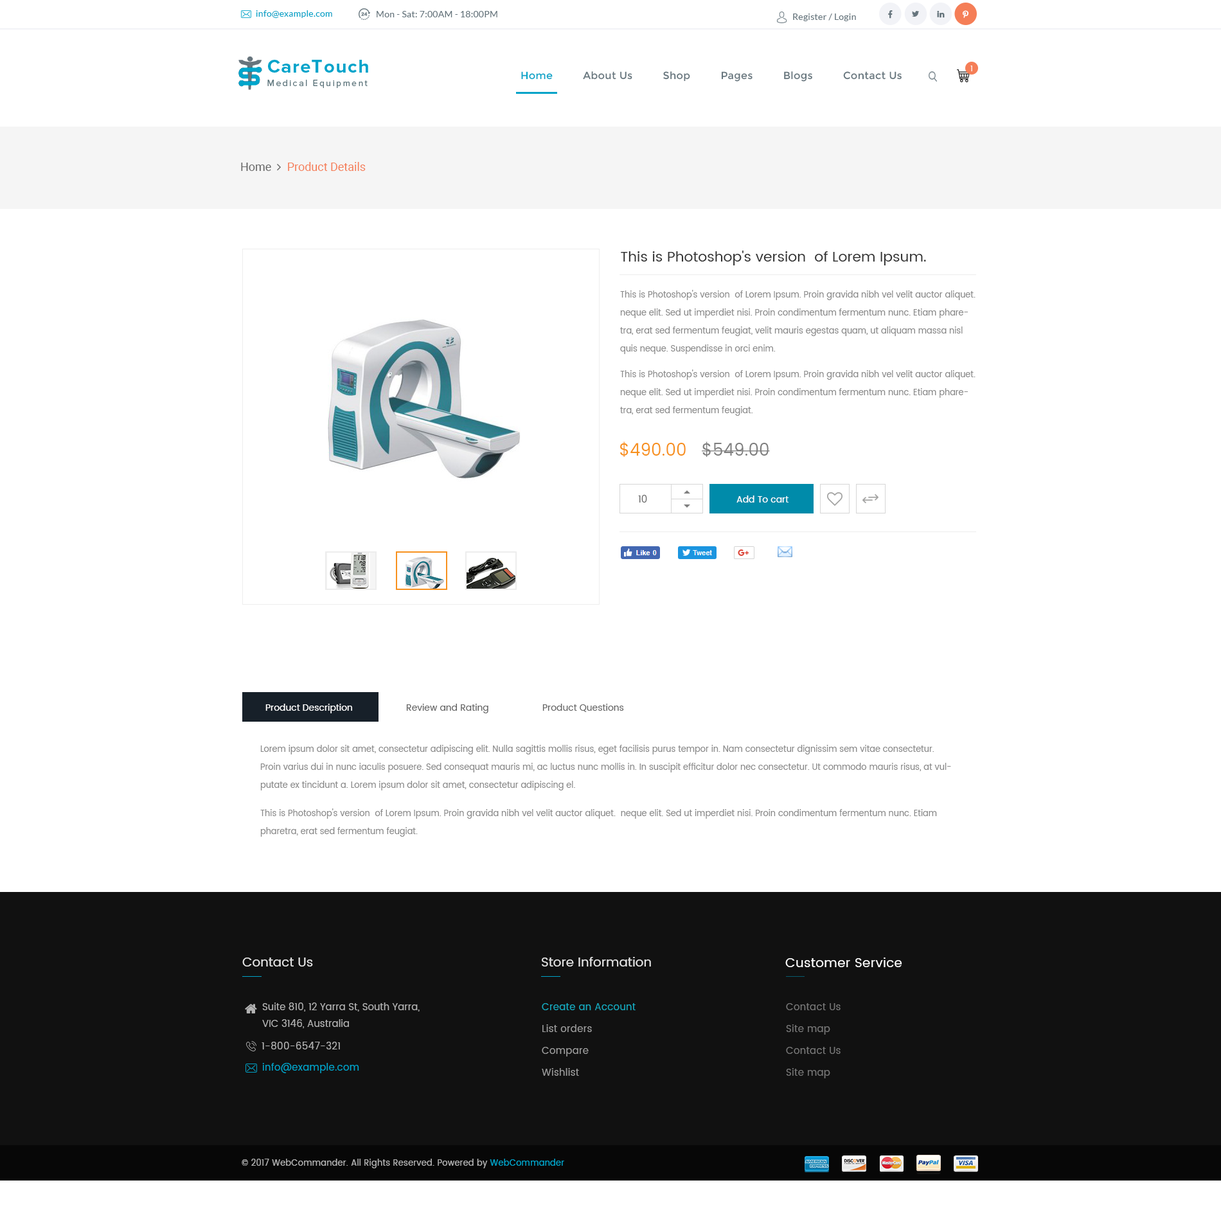
<style>
.page{position:relative;width:1221px;height:1221px;background:#ffffff}
.page>*{position:absolute;margin:0}
.t1{font:9px "Lato-Regular";letter-spacing:0.02em;color:#00a3c8}
.t2{font:9px "Lato-Regular";letter-spacing:0.02em;color:#66757d}
.t3{font:7.7px "Poppins-Regular";letter-spacing:0.025em;color:#ffffff}
.t4{font:10.3px "Montserrat-Regular";letter-spacing:0.02em;color:#66757d}
.t5{font:10.3px "Montserrat-Regular";letter-spacing:0.02em;color:#00a3c8}
.t6{font:14.1px "Poppins-Regular";color:#333333}
.t7{font:8.4px/18px "Poppins-Regular";color:#8a8a8a}
.t8{font:16.7px "Poppins-Regular";color:#f7911e}
.t9{font:16.7px "Poppins-Regular";color:#7f7f7f}
.t10{font:9.6px "Poppins-Regular";color:#666666}
.t11{font:9px "Poppins-Regular";color:#ffffff}
.t12{font:9px "Poppins-Regular";color:#666666}
.t13{font:12.9px "Poppins-Regular";color:#e6e6e6}
.t14{font:12.9px "Poppins-Regular";letter-spacing:0.02em;color:#ffffff}
.t15{font:9.6px/16.7px "Poppins-Regular";color:#b3b3b3}
.t16{font:9.6px/21.9px "Poppins-Regular";letter-spacing:0.02em;color:#9c9c9c}
.t17{font:9.6px/21.9px "Poppins-Regular";letter-spacing:0.02em;color:#15aabf}
.t18{font:9.6px/21.9px "Poppins-Regular";letter-spacing:0.02em;color:#777777}
.t19{font:9.6px "Poppins-Regular";letter-spacing:0.02em;color:#b4b4b4}
.t20{font:9.6px "Poppins-Regular";letter-spacing:0.02em;color:#00a3c8}
.t21{font:8.4px "Poppins-Regular";letter-spacing:0.02em;color:#b3b3b3}
.t22{font:8.4px "Poppins-Regular";letter-spacing:0.02em;color:#00a3c8}
</style>
<div class="page">
<p class="t1" style="left:256px;top:10px;width:76px;height:8px">info@example.com</p>
<p class="t2" style="left:377px;top:11px;width:121px;height:6px">Mon - Sat: 7:00AM - 18:00PM</p>
<p class="t2" style="left:793px;top:14px;width:63px;height:7px">Register / Login</p>
<p class="t3" style="left:971px;top:66px;width:2px;height:5px">1</p>
<p class="t4" style="left:521px;top:71px;width:381px;height:11px"><span class="t5">Home         </span> About Us          Shop          Pages          Blogs          Contact Us</p>
<p class="t6" style="left:621px;top:251px;width:305px;height:15px">This is Photoshop's version  of Lorem Ipsum.</p>
<p class="t7" style="left:620px;top:290px;width:356px;height:64px">This is Photoshop's version  of Lorem Ipsum. Proin gravida nibh vel velit auctor aliquet. <br>neque elit. Sed ut imperdiet nisi. Proin condimentum fermentum nunc. Etiam pharetra, erat sed fermentum feugiat, velit mauris egestas quam, ut aliquam massa nisl quis neque. Suspendisse in orci enim.</p>
<p class="t7" style="left:620px;top:370px;width:356px;height:46px">This is Photoshop's version  of Lorem Ipsum. Proin gravida nibh vel velit auctor aliquet. <br>neque elit. Sed ut imperdiet nisi. Proin condimentum fermentum nunc. Etiam pharetra, erat sed fermentum feugiat.</p>
<p class="t8" style="left:620px;top:442px;width:150px;height:15px">$490.00   <span class="t9">$549.00</span></p>
<p class="t10" style="left:638px;top:495px;width:9px;height:8px">10</p>
<p class="t11" style="left:737px;top:496px;width:52px;height:7px">Add To cart</p>
<p class="t11" style="left:266px;top:704px;width:86px;height:10px">Product Description</p>
<p class="t12" style="left:406px;top:704px;width:83px;height:10px">Review and Rating</p>
<p class="t12" style="left:543px;top:704px;width:81px;height:8px">Product Questions</p>
<p class="t7" style="left:260px;top:745px;width:691px;height:46px">Lorem ipsum dolor sit amet, consectetur adipiscing elit. Nulla sagittis mollis risus, eget facilisis purus tempor in. Nam consectetur dignissim sem vitae consectetur. Proin varius dui in nunc iaculis posuere. Sed consequat mauris mi, ac luctus nunc mollis in. In suscipit efficitur dolor nec consectetur. Ut commodo mauris risus, at vulputate ex tincidunt a. Lorem ipsum dolor sit amet, consectetur adipiscing el.</p>
<p class="t7" style="left:260px;top:809px;width:677px;height:28px">This is Photoshop's version  of Lorem Ipsum. Proin gravida nibh vel velit auctor aliquet.  neque elit. Sed ut imperdiet nisi. Proin condimentum fermentum nunc. Etiam pharetra, erat sed fermentum feugiat.</p>
<p class="t13" style="left:242px;top:958px;width:71px;height:9px">Contact Us</p>
<p class="t13" style="left:542px;top:957px;width:109px;height:10px">Store Information</p>
<p class="t14" style="left:786px;top:958px;width:117px;height:10px">Customer Service</p>
<p class="t15" style="left:262px;top:1003px;width:158px;height:26px">Suite 810, 12 Yarra St, South Yarra, VIC 3146, Australia</p>
<p class="t16" style="left:542px;top:1004px;width:94px;height:72px"><span class="t17">Create an Account<br></span>List orders<br>Compare<br>Wishlist</p>
<p class="t18" style="left:786px;top:1004px;width:55px;height:75px">Contact Us<br>Site map<br>Contact Us<br>Site map</p>
<p class="t19" style="left:262px;top:1042px;width:78px;height:8px">1-800-6547-321</p>
<p class="t20" style="left:262px;top:1063px;width:97px;height:11px">info@example.com</p>
<p class="t21" style="left:242px;top:1159px;width:322px;height:10px">© 2017 WebCommander. All Rights Reserved. Powered by <span class="t22">WebCommander</span></p>
</div>
